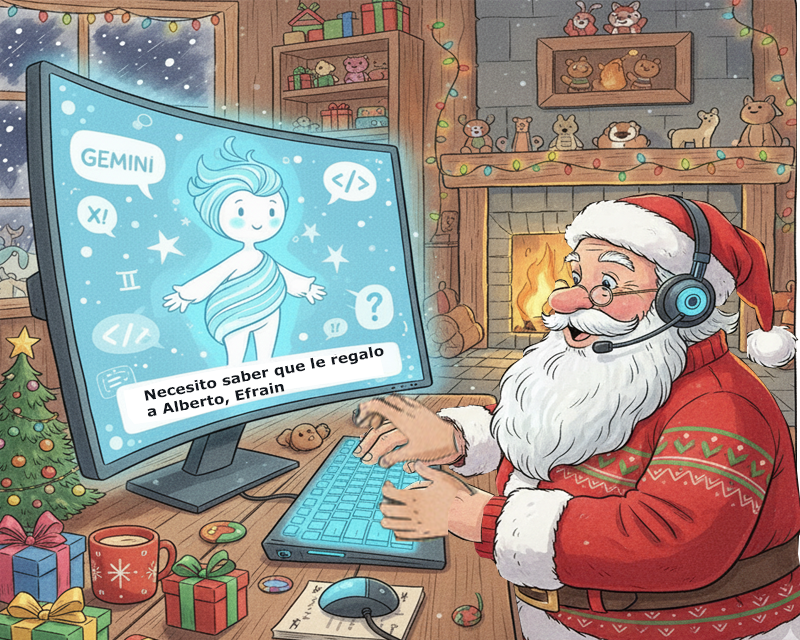
<style>
.page{position:relative;width:800px;height:640px}
.page>*{position:absolute;margin:0}
.t1{font:14px "Verdana-Bold";color:#13181e;scale:1.09 1}
</style>
<div class="page">
<p class="t1" style="left:144px;top:346px;width:240px;height:71px;rotate:-11deg">Necesito saber que le regalo<br>a Alberto, Efrain</p>
</div>
